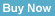
<style>
.page{position:relative;width:55px;height:16px;background:#57acc9}
.page>*{position:absolute;margin:0}
.t1{font:11.5px "Arial-BoldMT";letter-spacing:-0.005em;color:#ffffff}
</style>
<div class="page">
<p class="t1" style="left:3px;top:3px;width:49px;height:12px">Buy Now</p>
</div>
